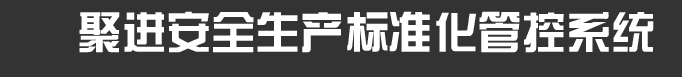
<style>
.page{position:relative;width:682px;height:77px;background:#333333}
.page>*{position:absolute;margin:0}
.t1{font:44.9px "JZhongYi";color:#ffffff}
</style>
<div class="page">
<p class="t1" style="left:79px;top:11px;width:575px;height:42px">聚进安全生产标准化管控系统</p>
</div>
